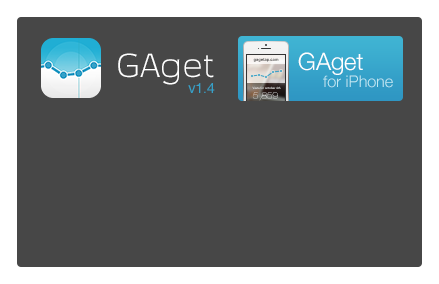
<style>
.page{position:relative;width:439px;height:284px;background:#474747}
.page>*{position:absolute;margin:0}
.t1{font:30px "Vezus-Light";color:#ffffff}
.t2{font:24px "HelveticaNeue-Light";color:#ffffff}
.t3{font:4px "HelveticaNeue-Bold"}
.t4{font:16px "HelveticaNeue-Light";color:#c0e8f3}
.t5{font:14px "Helvetica";color:#36a1c8}
.t6{font:3px "HelveticaNeue"}
.t7{font:10px "HelveticaNeue-UltraLight"}
</style>
<div class="page">
<p class="t1" style="left:118px;top:53px;width:96px;height:32px">GAget</p>
<p class="t2" style="left:298px;top:52px;width:65px;height:23px">GAget</p>
<p class="t3" style="left:253px;top:58px;width:26px;height:4px">gagetap.com</p>
<p class="t4" style="left:323px;top:75px;width:70px;height:13px">for iPhone</p>
<p class="t5" style="left:188px;top:83px;width:27px;height:10px">v1.4</p>
<p class="t6" style="left:252px;top:86px;width:29px;height:3px">Visits for october 4th</p>
<p class="t7" style="left:253px;top:92px;width:25px;height:9px">5,859</p>
</div>
